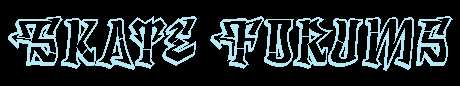
<style>
.page{position:relative;width:460px;height:86px;background:#000000}
.page>*{position:absolute;margin:0}
.t1{font:57.6px "Degrassi";letter-spacing:0.05em;color:#b5e7f4;scale:0.83 1}
</style>
<div class="page">
<p class="t1" style="left:8px;top:16px;width:445px;height:55px">Skate Forums</p>
</div>
